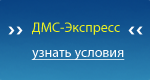
<style>
.page{position:relative;width:150px;height:80px}
.page>*{position:absolute;margin:0}
.t1{font:14px "MyriadPro-Regular";color:#edf122}
.t2{font:14px "MyriadPro-Regular";color:#ffffff;text-decoration:underline}
</style>
<div class="page">
<p class="t1" style="left:32px;top:22px;width:88px;height:13px">ДМС-Экспресс</p>
<p class="t2" style="left:31px;top:50px;width:94px;height:10px">узнать условия</p>
</div>
